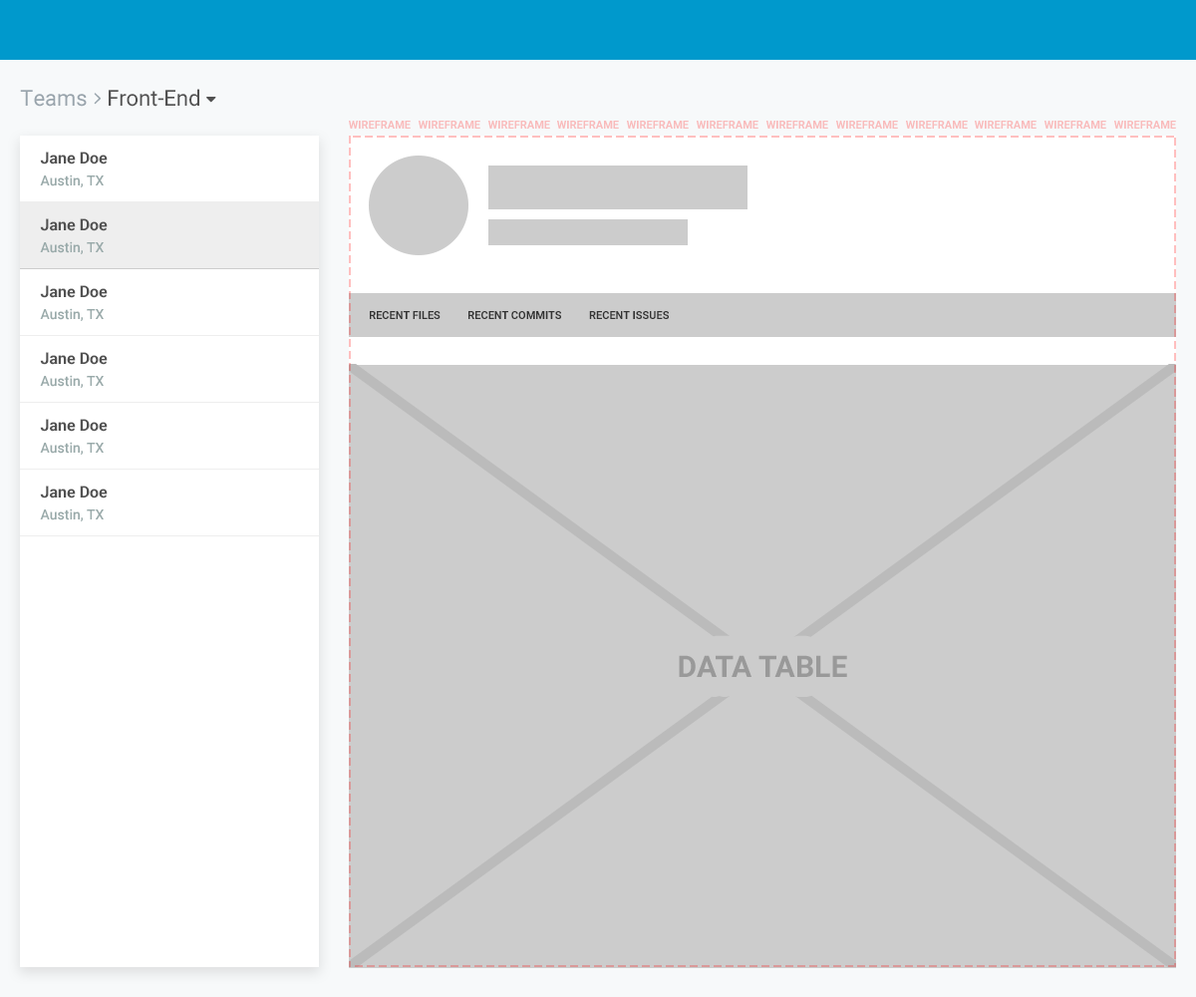
<style>
.page{position:relative;width:1196px;height:997px;background:#cccccc}
.page>*{position:absolute;margin:0}
.t1{font:21.9px "Roboto-Regular";color:#99a4ac}
.t2{font:21.9px "Roboto-Regular";color:#515151}
.t3{font:15.9px "Roboto-Bold";color:#515151}
.t4{font:14px "Roboto-Medium";color:#99aaaa}
.t5{font:11px "Roboto-Bold";color:#333333}
.t6{font:29.9px "Roboto-Bold";color:#999999}
</style>
<div class="page">
<p class="t1" style="left:20px;top:90px;width:67px;height:17px">Teams</p>
<p class="t2" style="left:109px;top:89px;width:90px;height:18px">Front-End</p>
<p class="t3" style="left:40px;top:152px;width:68px;height:12px">Jane Doe</p>
<p class="t4" style="left:40px;top:174px;width:64px;height:13px">Austin, TX</p>
<p class="t3" style="left:40px;top:218px;width:68px;height:13px">Jane Doe</p>
<p class="t4" style="left:40px;top:241px;width:64px;height:13px">Austin, TX</p>
<p class="t3" style="left:40px;top:285px;width:68px;height:13px">Jane Doe</p>
<p class="t4" style="left:40px;top:308px;width:64px;height:13px">Austin, TX</p>
<p class="t5" style="left:370px;top:311px;width:299px;height:8px">RECENT FILES          RECENT COMMITS          RECENT ISSUES</p>
<p class="t3" style="left:40px;top:352px;width:68px;height:13px">Jane Doe</p>
<p class="t4" style="left:40px;top:375px;width:64px;height:13px">Austin, TX</p>
<p class="t3" style="left:40px;top:419px;width:68px;height:13px">Jane Doe</p>
<p class="t4" style="left:40px;top:442px;width:64px;height:13px">Austin, TX</p>
<p class="t3" style="left:40px;top:485px;width:68px;height:13px">Jane Doe</p>
<p class="t4" style="left:40px;top:508px;width:64px;height:13px">Austin, TX</p>
<p class="t6" style="left:679px;top:655px;width:168px;height:22px">DATA TABLE</p>
</div>
